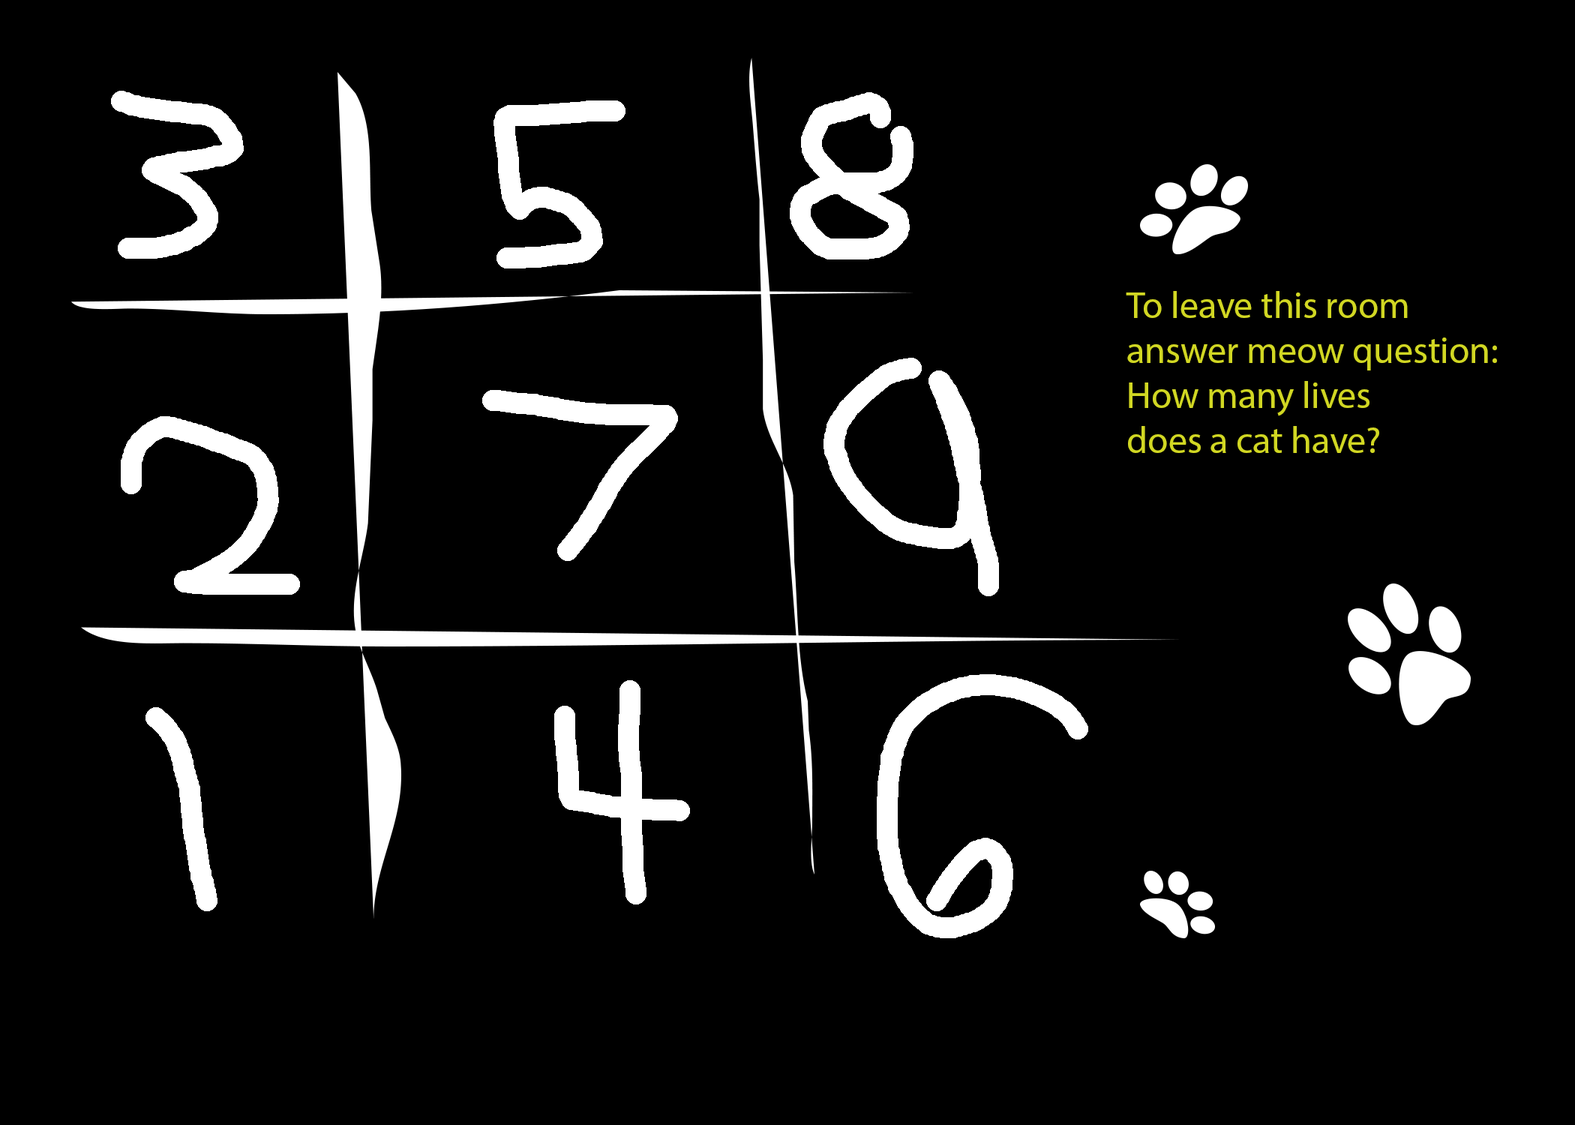
<style>
.page{position:relative;width:1575px;height:1125px;background:#000000}
.page>*{position:absolute;margin:0}
.t1{font:9px "MyriadPro-Regular";color:#d1d723}
</style>
<div class="page">
<p class="t1" style="left:1126px;top:291px;width:371px;height:162px">To leave this room<br>answer meow question:<br>How many lives<br>does a cat have?</p>
</div>
